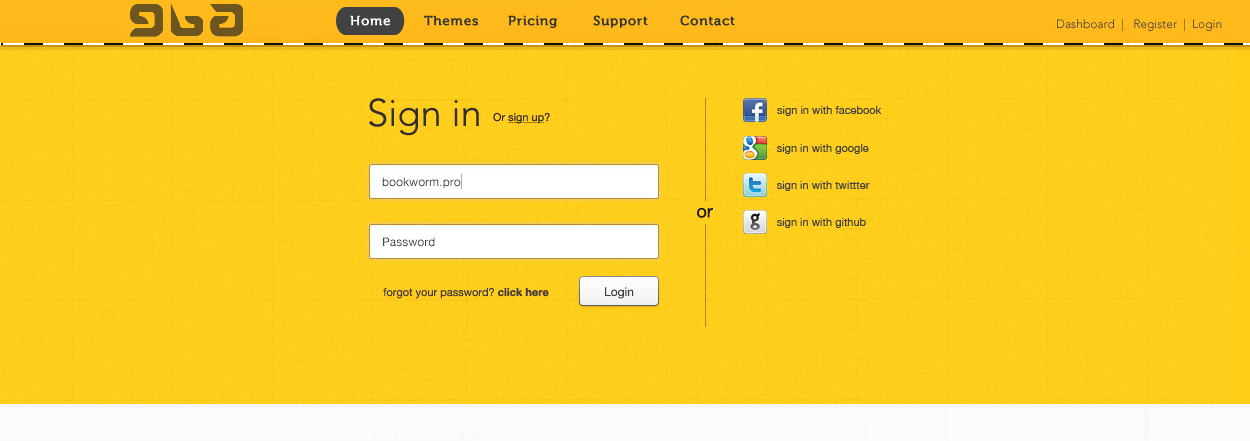
<style>
.page{position:relative;width:1250px;height:441px;background:#ffcc18}
.page>*{position:absolute;margin:0}
.t1{font:38px "AvenirLTStd-Light";color:#333333}
.t2{font:11px "HelveticaNeue";color:#333535;text-decoration:underline}
.t3{font:11px "HelveticaNeue";color:#333535}
.t4{font:11px "HelveticaNeue";color:#424242}
.t5{font:12px "HelveticaNeue";color:#444444}
.t6{font:18px "HelveticaNeue";color:#1d1d1d}
.t7{font:11px "HelveticaNeue-Bold";color:#424242}
.t8{font:12px "HelveticaNeue";color:#424242}
</style>
<div class="page">
<p class="t1" style="left:369px;top:98px;width:110px;height:38px">Sign in</p>
<p class="t2" style="left:493px;top:112px;width:57px;height:12px"><span class="t3">Or </span>sign up<span class="t3">?</span></p>
<p class="t4" style="left:777px;top:106px;width:105px;height:10px">sign in with facebook</p>
<p class="t4" style="left:777px;top:144px;width:92px;height:10px">sign in with google</p>
<p class="t5" style="left:382px;top:177px;width:79px;height:12px">bookworm.pro</p>
<p class="t4" style="left:777px;top:181px;width:93px;height:10px">sign in with twittter</p>
<p class="t6" style="left:697px;top:207px;width:16px;height:11px">or</p>
<p class="t4" style="left:777px;top:218px;width:89px;height:10px">sign in with github</p>
<p class="t5" style="left:383px;top:237px;width:52px;height:10px">Password</p>
<p class="t4" style="left:383px;top:287px;width:166px;height:12px">forgot your password? <span class="t7">click here</span></p>
<p class="t8" style="left:605px;top:287px;width:29px;height:12px">Login</p>
</div>
